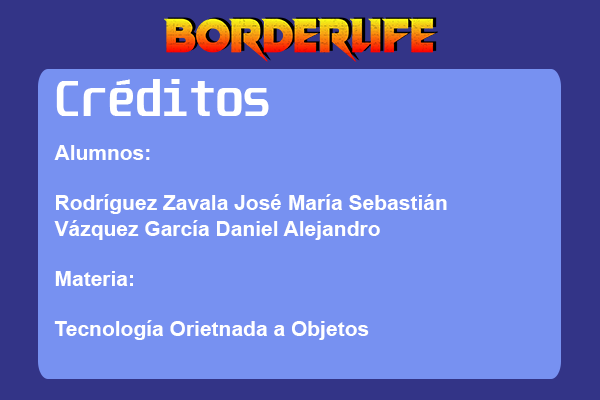
<style>
.page{position:relative;width:600px;height:400px;background:#7791f1}
.page>*{position:absolute;margin:0}
.t1{font:44px "Unispace-Bold";color:#ffffff}
.t2{font:21px "Arial-BoldMT";color:#ffffff}
</style>
<div class="page">
<p class="t1" style="left:56px;top:79px;width:213px;height:37px">Créditos</p>
<p class="t2" style="left:54px;top:145px;width:393px;height:195px">Alumnos:<br><br>Rodríguez Zavala José María Sebastián<br>Vázquez García Daniel Alejandro<br><br>Materia:<br><br>Tecnología Orietnada a Objetos</p>
</div>
